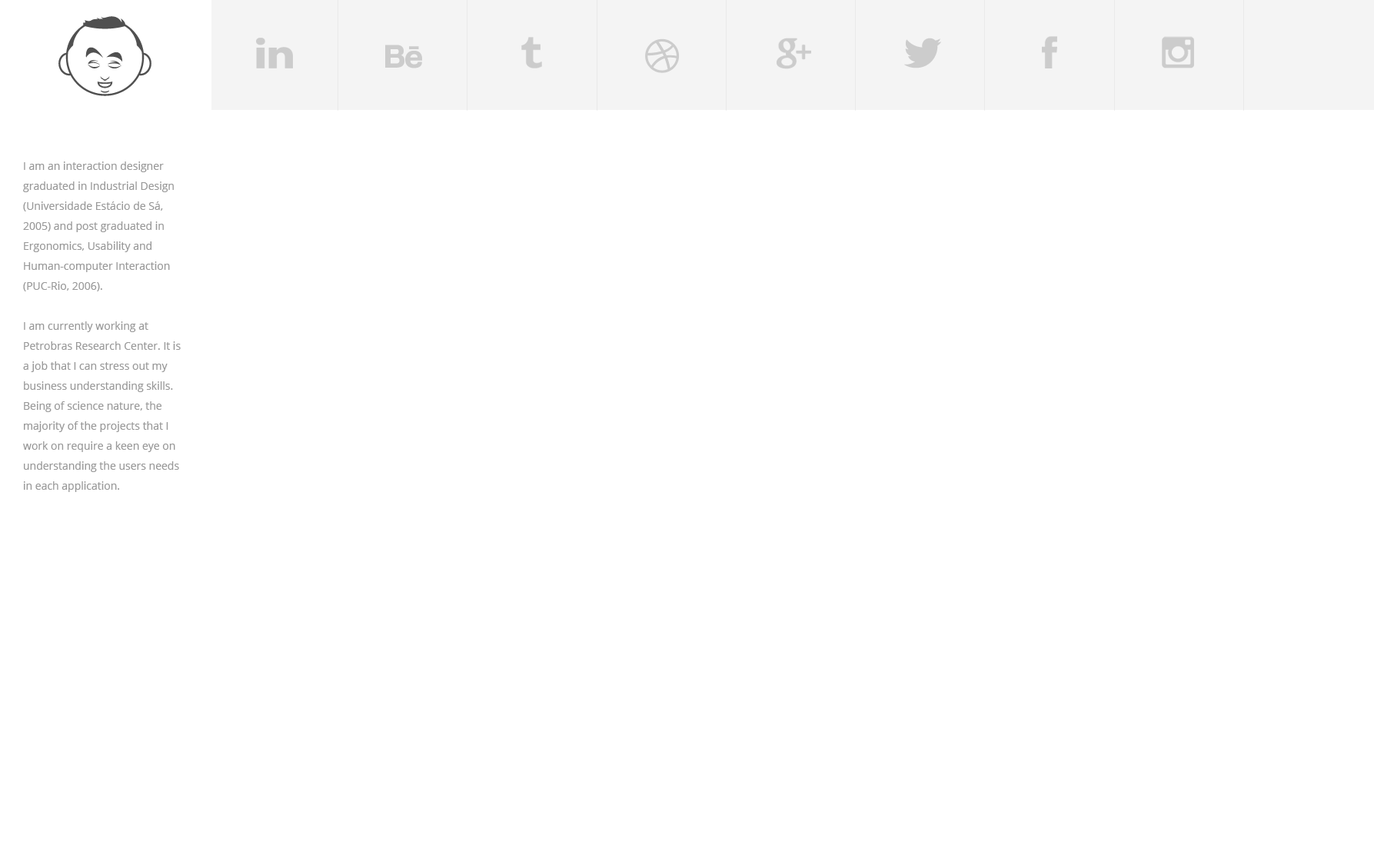
<style>
.page{position:relative;width:1374px;height:868px;background:#ffffff}
.page>*{position:absolute;margin:0}
.t1{font:10.8px/20px "OpenSans";color:#999999}
</style>
<div class="page">
<p class="t1" style="left:23px;top:161px;width:158px;height:331px">I am an interaction designer graduated in Industrial Design (Universidade Estácio de Sá, 2005) and post graduated in Ergonomics, Usability and Human-computer Interaction (PUC-Rio, 2006).<br><br>I am currently working at Petrobras Research Center. It is a job that I can stress out my business understanding skills. Being of science nature, the majority of the projects that I work on require a keen eye on understanding the users needs in each application.</p>
</div>
